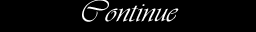
<style>
.page{position:relative;width:256px;height:32px;background:#000000}
.page>*{position:absolute;margin:0}
.t1{font:32px "Vivaldii";color:#ffffff;scale:1.04 1}
</style>
<div class="page">
<p class="t1" style="left:82px;top:0px;width:97px;height:22px">Continue</p>
</div>
